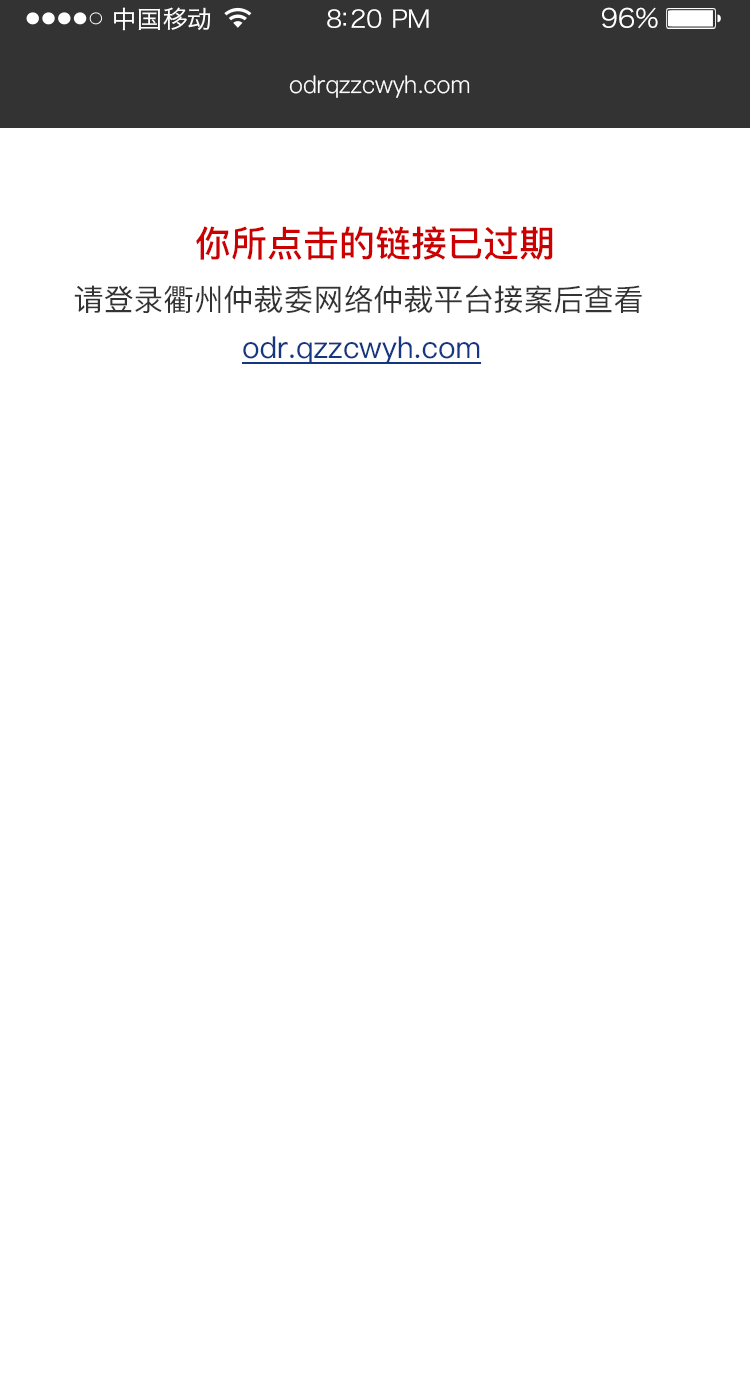
<style>
.page{position:relative;width:750px;height:1386px;background:#ffffff}
.page>*{position:absolute;margin:0}
.t1{font:24px "HiraginoSansGB-W3";letter-spacing:0.02em;color:#ffffff;scale:1.03 1}
.t2{font:24px "HiraginoSansGB-W3";letter-spacing:-0.02em;color:#ffffff;scale:1.03 1}
.t3{font:26.2px "HiraginoSansGB-W3";letter-spacing:-0.02em;color:#ffffff;scale:1.03 1}
.t4{font:24px "PingFang-SC-Regular";color:#ffffff}
.t5{font:36px "PingFang-SC-Bold";color:#cc0000}
.t6{font:30px "PingFang-SC-Medium";color:#333333}
.t7{font:30px "PingFang-SC-Medium";color:#133783;text-decoration:underline}
</style>
<div class="page">
<p class="t1" style="left:114px;top:7px;width:97px;height:24px">中国移动</p>
<p class="t2" style="left:327px;top:9px;width:102px;height:19px">8:20 PM</p>
<p class="t3" style="left:602px;top:7px;width:56px;height:22px">96%</p>
<p class="t4" style="left:289px;top:75px;width:181px;height:23px">odrqzzcwyh.com</p>
<p class="t5" style="left:196px;top:226px;width:357px;height:34px">你所点击的链接已过期</p>
<p class="t6" style="left:74px;top:285px;width:568px;height:28px">请登录衢州仲裁委网络仲裁平台接案后查看</p>
<p class="t7" style="left:242px;top:336px;width:240px;height:28px">odr.qzzcwyh.com</p>
</div>
